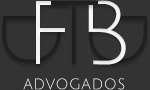
<style>
.page{position:relative;width:150px;height:90px;background:#333333}
.page>*{position:absolute;margin:0}
.t1{font:88.5px "JuliusSansOne-Regular";letter-spacing:0.04em;color:#ffffff}
.t2{font:16.4px "JuliusSansOne-Regular";letter-spacing:0.04em;scale:0.97 1}
</style>
<div class="page">
<p class="t1" style="left:36px;top:1px;width:32px;height:63px">F</p>
<p class="t1" style="left:88px;top:0px;width:38px;height:65px">B</p>
<p class="t2" style="left:23px;top:78px;width:102px;height:12px">advogados</p>
</div>
